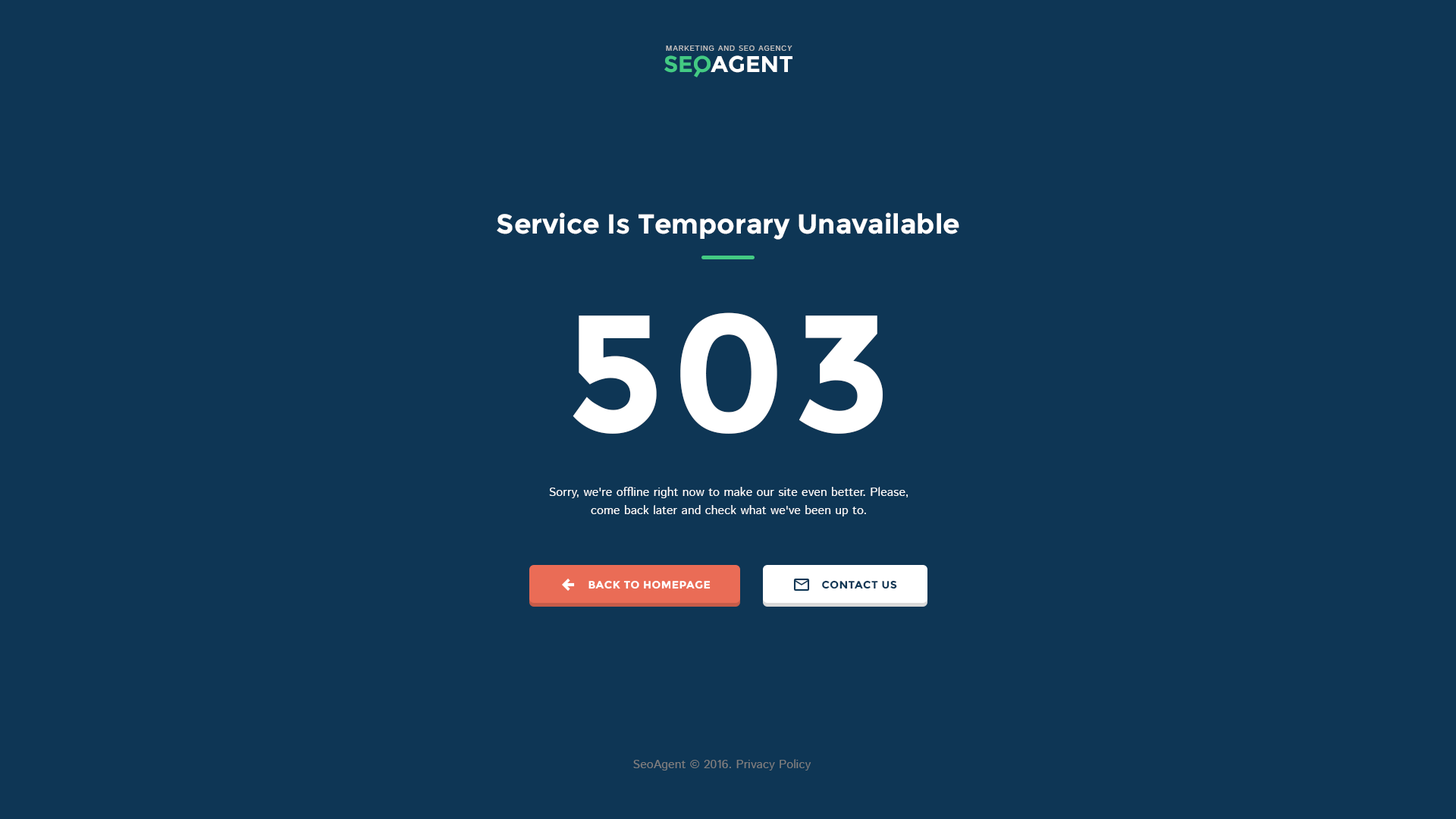
<style>
.page{position:relative;width:1456px;height:819px;background:#0e3655}
.page>*{position:absolute;margin:0}
.t1{font:7.6px "IstokWeb-Regular";letter-spacing:0.08em;color:#c1c1c1;text-transform:uppercase}
.t2{font:22.7px "Montserrat-Bold";color:#43ca83}
.t3{font:22.7px "Montserrat-Bold";color:#ffffff}
.t4{font:27.3px "Montserrat-Bold";color:#ffffff}
.t5{font:166.8px "Montserrat-Bold";letter-spacing:0.04em;color:#ffffff;text-transform:uppercase}
.t6{font:12.1px/18.2px "IstokWeb-Regular";color:#ffffff}
.t7{font:10.6px "Montserrat-Bold";letter-spacing:0.04em;color:#ffffff;text-transform:uppercase}
.t8{font:10.6px "Montserrat-Bold";letter-spacing:0.04em;color:#0e3655;text-transform:uppercase}
.t9{font:12.1px "IstokWeb-Regular";color:#7f7f7f}
</style>
<div class="page">
<p class="t1" style="left:666px;top:45px;width:126px;height:6px">Marketing and SEO agency</p>
<p class="t2" style="left:664px;top:55px;width:47px;height:18px">SEO</p>
<p class="t3" style="left:711px;top:55px;width:81px;height:18px">AGENT</p>
<p class="t4" style="left:497px;top:212px;width:462px;height:28px">Service Is Temporary Unavailable</p>
<p class="t5" style="left:573px;top:312px;width:310px;height:122px">503</p>
<p class="t6" style="left:549px;top:487px;width:359px;height:29px;text-align:center">Sorry, we're offline right now to make our site even better. Please, come back later and check what we've been up to.</p>
<p class="t7" style="left:588px;top:580px;width:123px;height:9px">back to homepage</p>
<p class="t8" style="left:822px;top:580px;width:75px;height:9px">contact us</p>
<p class="t9" style="left:633px;top:759px;width:178px;height:11px">SeoAgent © 2016. Privacy Policy</p>
</div>
